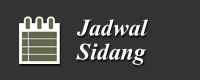
<style>
.page{position:relative;width:200px;height:80px;background:#333333}
.page>*{position:absolute;margin:0}
.t1{font:36px/24px "AngsanaUPC-BoldItalic";color:#fbfaf8}
</style>
<div class="page">
<p class="t1" style="left:76px;top:19px;width:72px;height:46px">Jadwal<br>Sidang</p>
</div>
